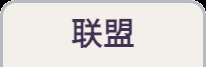
<style>
.page{position:relative;width:206px;height:67px;background:#f3efe9}
.page>*{position:absolute;margin:0}
.t1{font:32px/32px "WebPSD-18463539-0-Regular";color:#3f3254;font-weight:bold}
</style>
<div class="page">
<p class="t1" style="left:0px;top:0px;width:206px;height:67px;text-align:center">联盟</p>
</div>
